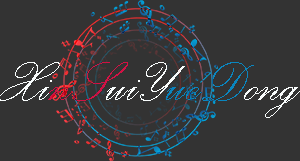
<style>
.page{position:relative;width:300px;height:161px;background:#333333}
.page>*{position:absolute;margin:0}
.t1{font:71.4px "PalaceScriptMT";color:#f9fdfd;scale:0.94 1}
.t2{font:71.4px "PalaceScriptMT";color:#d21244;scale:0.94 1}
.t3{font:71.4px "PalaceScriptMT";color:#0a86bf;scale:0.94 1}
</style>
<div class="page">
<p class="t1" style="left:0px;top:62px;width:300px;height:56px">Xi<span class="t2">nS</span>uiY<span class="t3">ueD</span>ong</p>
</div>
